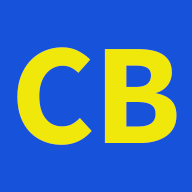
<style>
.page{position:relative;width:192px;height:192px;background:#1753da}
.page>*{position:absolute;margin:0}
.t1{font:144px "SourceSansPro-Bold";color:#f0e80a}
</style>
<div class="page">
<p class="t1" style="left:17px;top:47px;width:160px;height:98px">CB</p>
</div>
